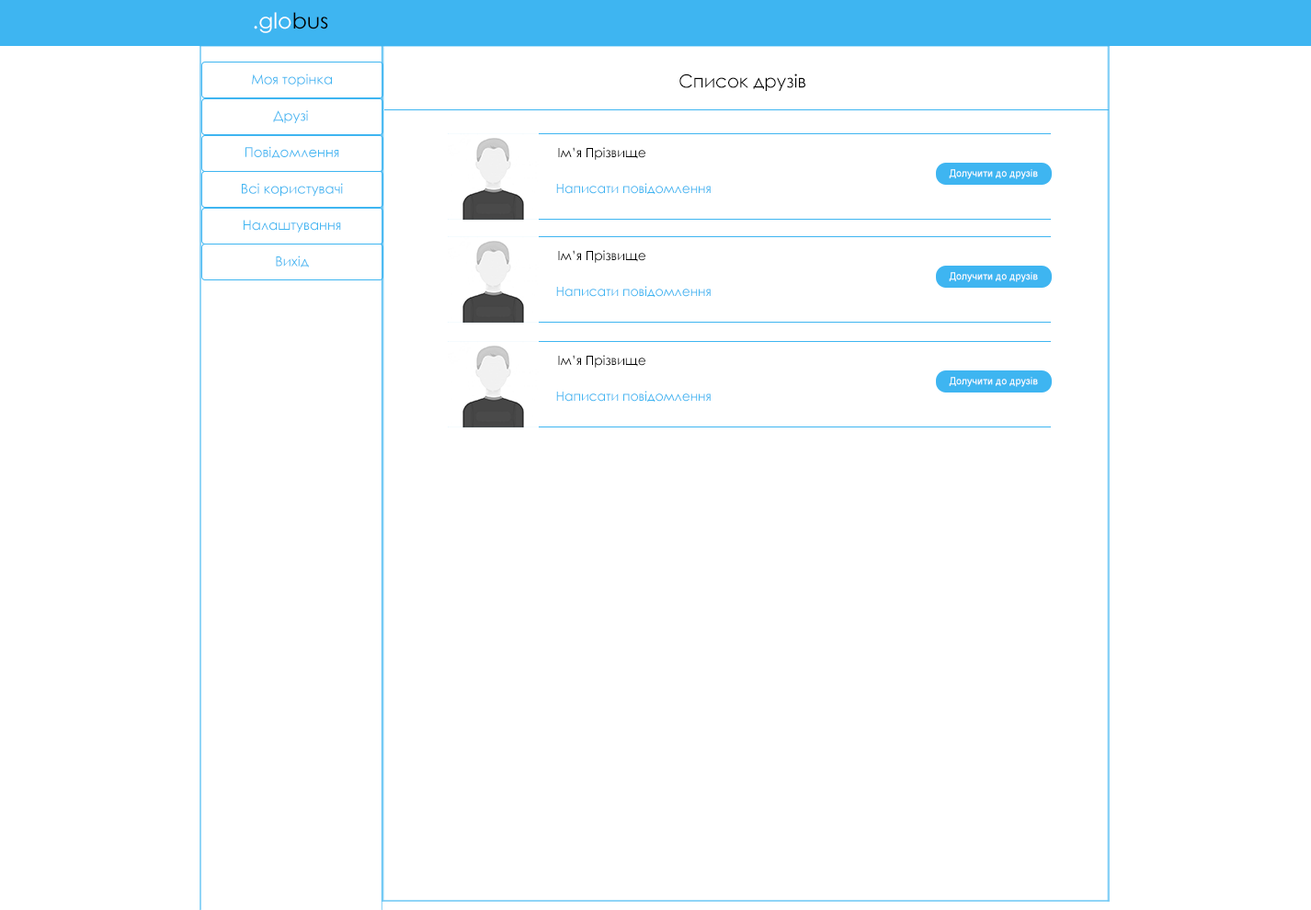
<style>
.page{position:relative;width:1311px;height:910px;background:#ffffff}
.page>*{position:absolute;margin:0}
.t1{font:21.8px "CenturyGothic";color:#ffffff}
.t2{font:21.8px "CenturyGothic";color:#000000}
.t3{font:13.6px "CenturyGothic";color:#3eb5f1}
.t4{font:18.2px "CenturyGothic";color:#000000}
.t5{font:12.9px "CenturyGothic";color:#000000}
.t6{font:10px "ArialMT";color:#ffffff}
.t7{font:12.9px "CenturyGothic";color:#3eb5f1}
</style>
<div class="page">
<p class="t1" style="left:254px;top:12px;width:74px;height:21px">.glo<span class="t2">bus</span></p>
<p class="t3" style="left:252px;top:74px;width:80px;height:13px">Моя торінка</p>
<p class="t4" style="left:679px;top:74px;width:126px;height:17px">Список друзів</p>
<p class="t3" style="left:273px;top:110px;width:35px;height:13px">Друзі</p>
<p class="t3" style="left:245px;top:146px;width:94px;height:12px">Повідомлення</p>
<p class="t5" style="left:558px;top:147px;width:87px;height:13px">Ім’я Прізвище</p>
<p class="t6" style="left:948px;top:169px;width:90px;height:10px">Долучити до друзів</p>
<p class="t3" style="left:242px;top:183px;width:101px;height:14px">Всі користувачі</p>
<p class="t7" style="left:556px;top:183px;width:154px;height:11px">Написати повідомлення</p>
<p class="t3" style="left:244px;top:220px;width:97px;height:13px">Налаштування</p>
<p class="t3" style="left:276px;top:255px;width:33px;height:12px">Вихід</p>
<p class="t5" style="left:558px;top:250px;width:87px;height:13px">Ім’я Прізвище</p>
<p class="t6" style="left:948px;top:272px;width:90px;height:10px">Долучити до друзів</p>
<p class="t7" style="left:556px;top:286px;width:154px;height:11px">Написати повідомлення</p>
<p class="t5" style="left:558px;top:355px;width:87px;height:13px">Ім’я Прізвище</p>
<p class="t6" style="left:948px;top:377px;width:90px;height:10px">Долучити до друзів</p>
<p class="t7" style="left:556px;top:391px;width:154px;height:11px">Написати повідомлення</p>
</div>
